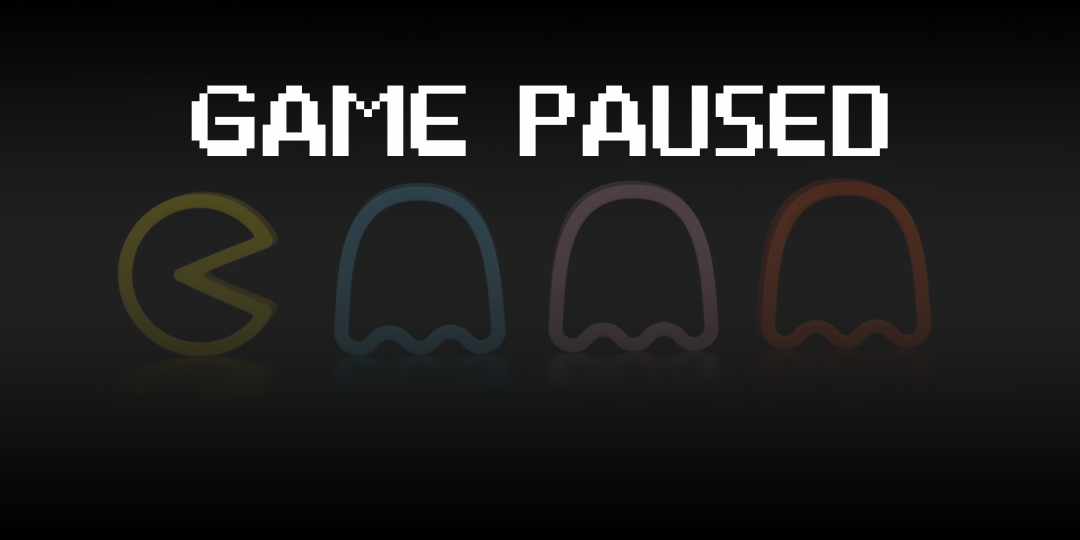
<style>
.page{position:relative;width:1080px;height:540px}
.page>*{position:absolute;margin:0}
.t1{font:250px "Game-Over";color:#fefefe}
</style>
<div class="page">
<p class="t1" style="left:191px;top:85px;width:697px;height:71px">GAME  PAUSED</p>
</div>
